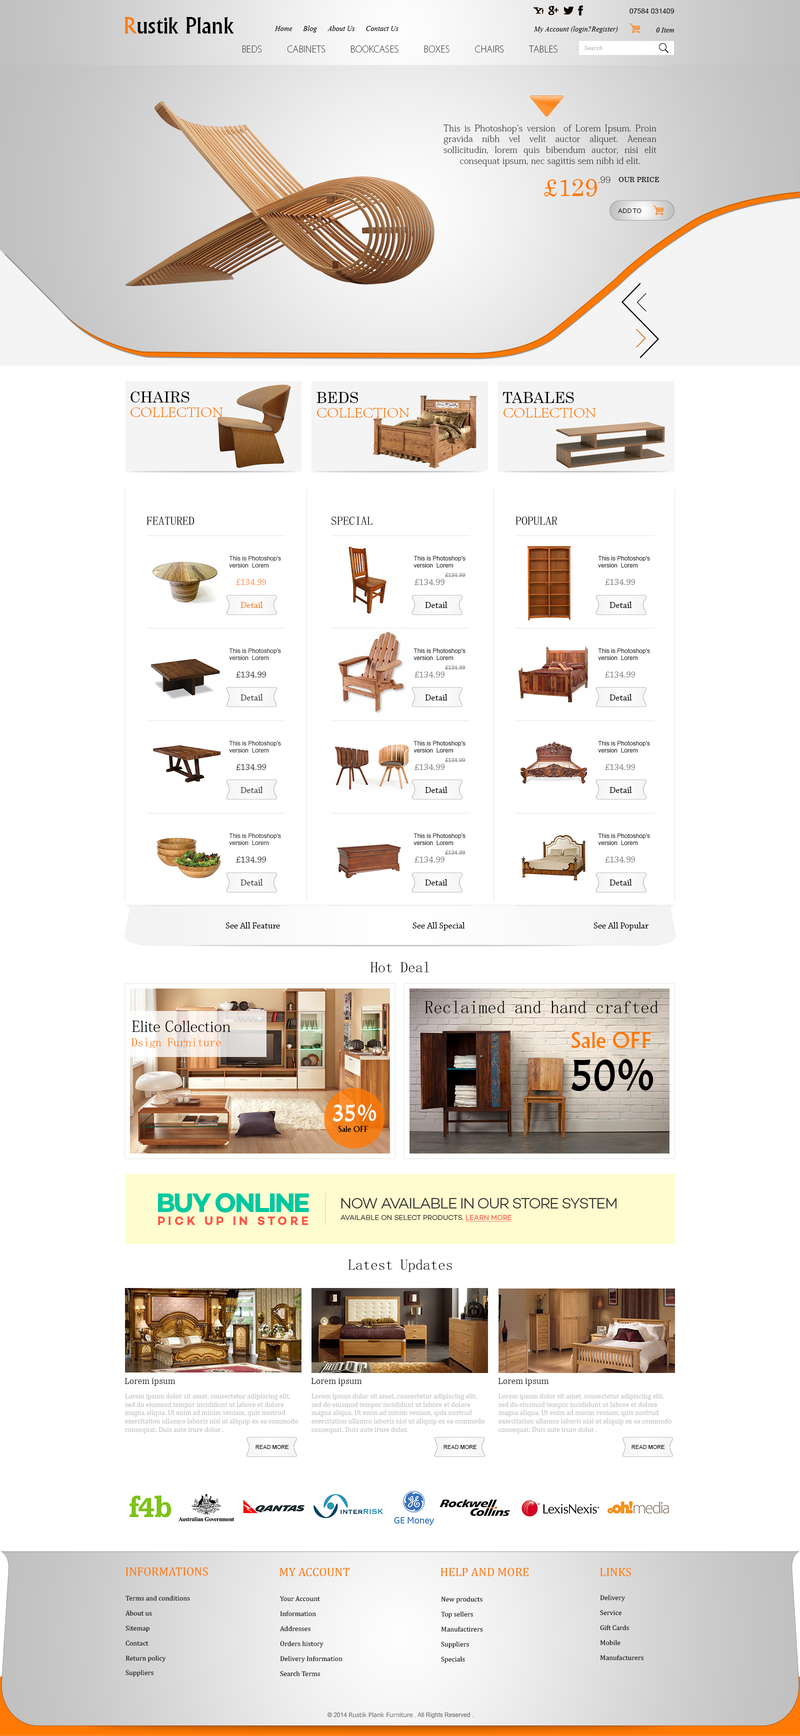
<style>
.page{position:relative;width:800px;height:1736px;background:#ffffff}
.page>*{position:absolute;margin:0}
.t1{font:24px "Narkisim";color:#000000}
.t2{font:24px "Narkisim";color:#ff7904}
.t3{font:7px "ArialMT";color:#000000}
.t4{font:9px "Vijaya";color:#000000}
.t5{font:9px "KozGoPro-ExtraLight";color:#3b3b3b}
.t6{font:6px "SimSun-ExtB";color:#afafaf}
.t7{font:9px "KozMinPro-ExtraLight";color:#3b3b3b}
.t8{font:24px "Century";color:#ff7904}
.t9{font:7px "Century";color:#000000}
.t10{font:7px "Corbel";color:#000000}
.t11{font:15px "Century";color:#000000}
.t12{font:15px "AdobeSongStd-Light";color:#ff7904}
.t13{font:12px "SimSun-ExtB";color:#000000}
.t14{font:6px "ArialMT";color:#3b3b3b}
.t15{font:6px "ArialMT";color:#2f2f2f}
.t16{font:9px "ChaparralPro-Regular";color:#fd9656}
.t17{font:9px "ChaparralPro-Regular";color:#828282}
.t18{font:6px "ChaparralPro-Regular";color:#828282}
.t19{font:9px "ChaparralPro-Regular";color:#ff7904}
.t20{font:9px "ChaparralPro-Regular";color:#000000}
.t21{font:9px "ChaparralPro-Regular";color:#3b3b3b}
.t22{font:15px "SimSun-ExtB";color:#000000}
.t23{font:18px "SimSun-ExtB";color:#000000}
.t24{font:15px "AdobeFangsongStd-Regular";color:#000000}
.t25{font:12px "SimSun-ExtB";color:#ff7904}
.t26{font:23px "Narkisim";color:#ff7904}
.t27{font:55.5px "Narkisim";color:#000000}
.t28{font:29.5px "Narkisim";color:#ffffff}
.t29{font:8.5px "Narkisim";color:#000000}
.t30{font:9px "Cambria";color:#3b3b3b}
.t31{font:7px "Cambria";color:#c5c5c5}
.t32{font:5.5px "ArialMT";color:#000000}
.t33{font:12px "Cambria";color:#ff7904}
.t34{font:7px/15px "Cambria";color:#000000}
.t35{font:7px "Cambria";color:#000000}
.t36{font:6px "ArialMT";color:#6e6e6e}
.t37{font:6px "MeiryoUI";color:#6e6e6e}
</style>
<div class="page">
<p class="t1" style="left:124px;top:17px;width:110px;height:17px"><span class="t2">R</span>ustik Plank</p>
<p class="t3" style="left:630px;top:8px;width:44px;height:6px">07584 031409</p>
<p class="t4" style="left:274px;top:26px;width:124px;height:6px">Home      Blog      About Us      Contact Us</p>
<p class="t4" style="left:534px;top:26px;width:84px;height:7px">My Account (login?Register)</p>
<p class="t4" style="left:656px;top:28px;width:18px;height:4px">0 Item</p>
<p class="t5" style="left:242px;top:46px;width:316px;height:6px">BEDS            CABINETS            BOOKCASES            BOXES            CHAIRS            TABLES</p>
<p class="t6" style="left:584px;top:46px;width:18px;height:4px">Search</p>
<p class="t7" style="left:444px;top:124px;width:212px;height:42px;text-align:justify">This is Photoshop's version  of Lorem Ipsum. Proin gravida nibh vel velit auctor aliquet. Aenean sollicitudin, lorem quis bibendum auctor, nisi elit consequat ipsum, nec sagittis sem nibh id elit.</p>
<p class="t8" style="left:544px;top:179px;width:53px;height:17px">£129</p>
<p class="t7" style="left:598px;top:176px;width:12px;height:7px">.99</p>
<p class="t9" style="left:618px;top:177px;width:42px;height:5px">OUR PRICE</p>
<p class="t10" style="left:618px;top:208px;width:24px;height:5px">ADD TO</p>
<p class="t11" style="left:130px;top:392px;width:60px;height:10px">CHAIRS</p>
<p class="t11" style="left:316px;top:392px;width:42px;height:11px">BEDS</p>
<p class="t11" style="left:502px;top:392px;width:72px;height:11px">TABALES</p>
<p class="t12" style="left:130px;top:407px;width:94px;height:10px">COLLECTION</p>
<p class="t12" style="left:317px;top:408px;width:93px;height:10px">COLLECTION</p>
<p class="t12" style="left:504px;top:408px;width:92px;height:10px">COLLECTION</p>
<p class="t13" style="left:146px;top:516px;width:48px;height:9px">FEATURED</p>
<p class="t13" style="left:331px;top:516px;width:42px;height:9px">SPECIAL</p>
<p class="t13" style="left:516px;top:516px;width:42px;height:9px">POPULAR</p>
<p class="t14" style="left:229px;top:556px;width:52px;height:12px">This is Photoshop's version  Lorem Ipsum. Proin</p>
<p class="t15" style="left:414px;top:556px;width:52px;height:12px">This is Photoshop's version  Lorem Ipsum. Proin</p>
<p class="t15" style="left:598px;top:556px;width:52px;height:12px">This is Photoshop's version  Lorem Ipsum. Proin</p>
<p class="t16" style="left:236px;top:579px;width:30px;height:6px">£134.99</p>
<p class="t17" style="left:414px;top:579px;width:30px;height:6px">£134.99</p>
<p class="t18" style="left:445px;top:573px;width:21px;height:4px">£134.99</p>
<p class="t17" style="left:604px;top:579px;width:31px;height:6px">£134.99</p>
<p class="t19" style="left:240px;top:602px;width:23px;height:6px">Detail</p>
<p class="t20" style="left:425px;top:602px;width:23px;height:6px">Detail</p>
<p class="t20" style="left:610px;top:602px;width:22px;height:6px">Detail</p>
<p class="t14" style="left:229px;top:648px;width:52px;height:12px">This is Photoshop's version  Lorem Ipsum. Proin</p>
<p class="t15" style="left:414px;top:648px;width:52px;height:12px">This is Photoshop's version  Lorem Ipsum. Proin</p>
<p class="t15" style="left:598px;top:648px;width:52px;height:12px">This is Photoshop's version  Lorem Ipsum. Proin</p>
<p class="t18" style="left:445px;top:666px;width:21px;height:4px">£134.99</p>
<p class="t21" style="left:236px;top:672px;width:30px;height:6px">£134.99</p>
<p class="t17" style="left:414px;top:672px;width:30px;height:6px">£134.99</p>
<p class="t17" style="left:604px;top:672px;width:31px;height:6px">£134.99</p>
<p class="t21" style="left:240px;top:694px;width:23px;height:6px">Detail</p>
<p class="t20" style="left:425px;top:694px;width:23px;height:6px">Detail</p>
<p class="t20" style="left:610px;top:694px;width:22px;height:6px">Detail</p>
<p class="t14" style="left:229px;top:741px;width:52px;height:11px">This is Photoshop's version  Lorem Ipsum. Proin</p>
<p class="t15" style="left:414px;top:741px;width:52px;height:11px">This is Photoshop's version  Lorem Ipsum. Proin</p>
<p class="t15" style="left:598px;top:741px;width:52px;height:11px">This is Photoshop's version  Lorem Ipsum. Proin</p>
<p class="t18" style="left:445px;top:758px;width:21px;height:4px">£134.99</p>
<p class="t21" style="left:236px;top:764px;width:30px;height:6px">£134.99</p>
<p class="t17" style="left:414px;top:764px;width:30px;height:6px">£134.99</p>
<p class="t17" style="left:604px;top:764px;width:31px;height:6px">£134.99</p>
<p class="t21" style="left:240px;top:786px;width:23px;height:7px">Detail</p>
<p class="t20" style="left:425px;top:786px;width:23px;height:7px">Detail</p>
<p class="t20" style="left:610px;top:786px;width:22px;height:7px">Detail</p>
<p class="t14" style="left:229px;top:834px;width:52px;height:11px">This is Photoshop's version  Lorem Ipsum. Proin</p>
<p class="t15" style="left:414px;top:834px;width:52px;height:11px">This is Photoshop's version  Lorem Ipsum. Proin</p>
<p class="t15" style="left:598px;top:834px;width:52px;height:11px">This is Photoshop's version  Lorem Ipsum. Proin</p>
<p class="t21" style="left:236px;top:856px;width:30px;height:6px">£134.99</p>
<p class="t17" style="left:414px;top:856px;width:30px;height:6px">£134.99</p>
<p class="t18" style="left:445px;top:850px;width:21px;height:4px">£134.99</p>
<p class="t17" style="left:604px;top:856px;width:31px;height:6px">£134.99</p>
<p class="t21" style="left:240px;top:879px;width:23px;height:7px">Detail</p>
<p class="t20" style="left:425px;top:879px;width:23px;height:7px">Detail</p>
<p class="t20" style="left:610px;top:879px;width:22px;height:7px">Detail</p>
<p class="t20" style="left:226px;top:922px;width:54px;height:6px">See All Feature</p>
<p class="t20" style="left:412px;top:922px;width:53px;height:8px">See All Special</p>
<p class="t20" style="left:594px;top:922px;width:55px;height:8px">See All Popular</p>
<p class="t22" style="left:370px;top:962px;width:59px;height:10px">Hot Deal</p>
<p class="t23" style="left:425px;top:1000px;width:233px;height:14px">Reclaimed and hand crafted</p>
<p class="t24" style="left:132px;top:1020px;width:98px;height:28px;text-align:justify">Elite Collection <br><span class="t25">Dsign Furniture</span></p>
<p class="t26" style="left:572px;top:1032px;width:80px;height:16px">Sale OFF</p>
<p class="t27" style="left:571px;top:1059px;width:83px;height:32px">50%</p>
<p class="t28" style="left:332px;top:1104px;width:44px;height:18px">35%</p>
<p class="t29" style="left:338px;top:1126px;width:30px;height:6px">Sale OFF</p>
<p class="t22" style="left:348px;top:1259px;width:104px;height:13px">Latest Updates</p>
<p class="t30" style="left:124px;top:1378px;width:52px;height:8px">Lorem ipsum</p>
<p class="t30" style="left:311px;top:1378px;width:51px;height:8px">Lorem ipsum</p>
<p class="t30" style="left:498px;top:1378px;width:51px;height:8px">Lorem ipsum</p>
<p class="t31" style="left:125px;top:1394px;width:173px;height:40px">Lorem ipsum dolor sit amet, consectetur adipiscing elit, sed do eiusmod tempor incididunt ut labore et dolore magna aliqua. Ut enim ad minim veniam, quis nostrud exercitation ullamco laboris nisi ut aliquip ex ea commodo consequat. Duis aute irure dolor .</p>
<p class="t31" style="left:312px;top:1394px;width:172px;height:40px">Lorem ipsum dolor sit amet, consectetur adipiscing elit, sed do eiusmod tempor incididunt ut labore et dolore magna aliqua. Ut enim ad minim veniam, quis nostrud exercitation ullamco laboris nisi ut aliquip ex ea commodo consequat. Duis aute irure dolor.</p>
<p class="t31" style="left:498px;top:1394px;width:174px;height:40px">Lorem ipsum dolor sit amet, consectetur adipiscing elit, sed do eiusmod tempor incididunt ut labore et dolore magna aliqua. Ut enim ad minim veniam, quis nostrud exercitation ullamco laboris nisi ut aliquip ex ea commodo consequat. Duis aute irure dolor .</p>
<p class="t32" style="left:256px;top:1445px;width:33px;height:4px">READ MORE</p>
<p class="t32" style="left:444px;top:1445px;width:33px;height:4px">READ MORE</p>
<p class="t32" style="left:632px;top:1445px;width:33px;height:4px">READ MORE</p>
<p class="t33" style="left:126px;top:1567px;width:82px;height:9px">INFORMATIONS</p>
<p class="t33" style="left:280px;top:1568px;width:70px;height:8px">MY ACCOUNT</p>
<p class="t33" style="left:440px;top:1568px;width:89px;height:8px">HELP AND MORE</p>
<p class="t33" style="left:600px;top:1568px;width:31px;height:8px">LINKS</p>
<p class="t34" style="left:126px;top:1596px;width:64px;height:81px">Terms and conditions<br>About us<br>Sitemap<br>Contact<br>Return policy<br><span class="t35">Suppliers</span></p>
<p class="t34" style="left:280px;top:1596px;width:62px;height:80px"><span class="t35">Y</span>our Account<br>Information<br>Addresses<br>Orders history<br>Delivery Information<br>Search Terms</p>
<p class="t34" style="left:441px;top:1596px;width:42px;height:68px">New products<br>Top sellers<br>Manufactirers<br>Suppliers<br>Specials</p>
<p class="t34" style="left:600px;top:1595px;width:44px;height:65px">Delivery<br>Service<br>Gift Cards<br>Mobile<br>Manufacturers</p>
<p class="t36" style="left:327px;top:1712px;width:147px;height:6px">© 2014 <span class="t37">Rustik Plank Furniture</span> . All Rights Reserved .</p>
</div>
